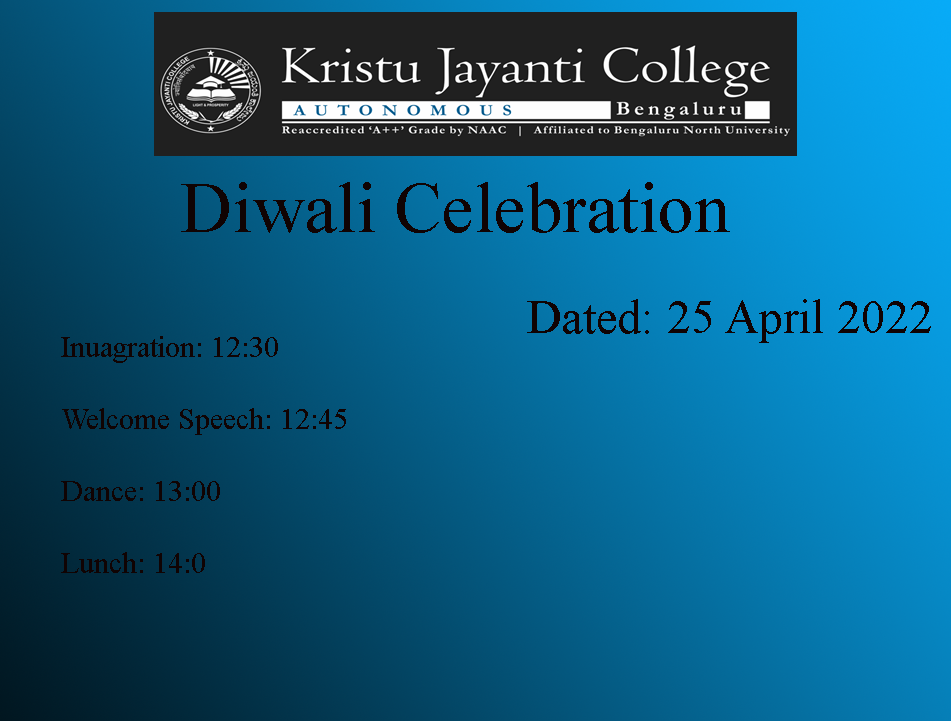
<style>
.page{position:relative;width:951px;height:721px}
.page>*{position:absolute;margin:0}
.t1{font:72px "TimesNewRomanPSMT";color:#100303}
.t2{font:48px "TimesNewRomanPSMT";color:#100303}
.t3{font:30px "TimesNewRomanPSMT";color:#100303}
</style>
<div class="page">
<p class="t1" style="left:181px;top:182px;width:549px;height:51px">Diwali Celebration</p>
<p class="t2" style="left:527px;top:299px;width:404px;height:44px">Dated: 25 April 2022</p>
<p class="t3" style="left:61px;top:336px;width:285px;height:237px">Inuagration: 12:30 <br><br>Welcome Speech: 12:45 <br><br>Dance: 13:00<br><br>Lunch: 14:0</p>
</div>
